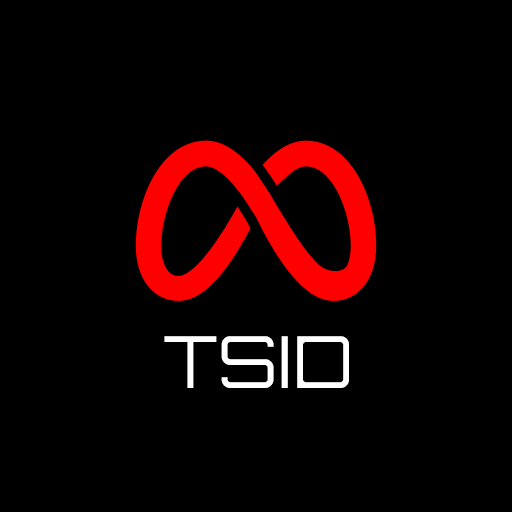
<style>
.page{position:relative;width:512px;height:512px;background:#000000}
.page>*{position:absolute;margin:0}
.t1{font:72px "Orbitron-Regular";color:#ffffff}
</style>
<div class="page">
<p class="t1" style="left:164px;top:336px;width:185px;height:52px">TSID</p>
</div>
